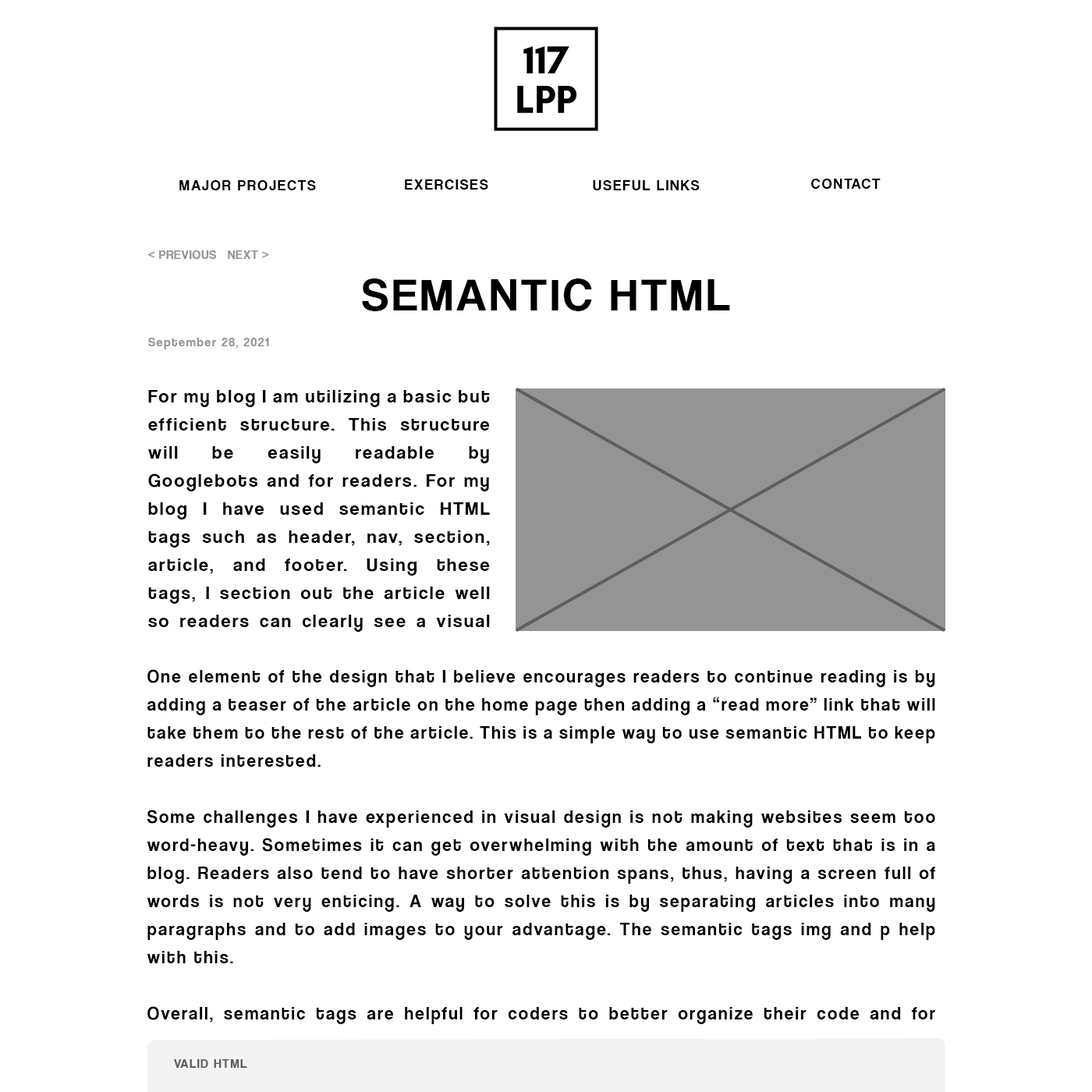
<style>
.page{position:relative;width:1092px;height:1092px;background:#ffffff}
.page>*{position:absolute;margin:0}
.t1{font:15.2px "CoolveticaRg-Regular";letter-spacing:0.1em;color:#000000}
.t2{font:12.5px "CoolveticaRg-Regular";letter-spacing:0.05em;color:#949494}
.t3{font:46.8px "CoolveticaRg-Regular";letter-spacing:0.075em;color:#000000}
.t4{font:18.7px/28.1px "CoolveticaRg-Regular";letter-spacing:0.1em;color:#000000}
.t5{font:12.5px/28.1px "CoolveticaRg-Regular";letter-spacing:0.1em;color:#949494}
.t6{font:18.7px/28.1px "CoolveticaRg-Regular";letter-spacing:0.1em;color:#000000;scale:0.96 1}
.t7{font:18.7px/28.1px "CoolveticaRg-Regular";letter-spacing:0.1em;color:#949494;scale:0.96 1}
.t8{font:12.5px "CoolveticaRg-Regular";letter-spacing:0.1em;color:#5f5e5e}
</style>
<div class="page">
<p class="t1" style="left:179px;top:180px;width:137px;height:10px">MAJOR PROJECTS</p>
<p class="t1" style="left:405px;top:179px;width:83px;height:11px">EXERCISES</p>
<p class="t1" style="left:593px;top:180px;width:107px;height:10px">USEFUL LINKS</p>
<p class="t1" style="left:811px;top:179px;width:70px;height:10px">CONTACT</p>
<p class="t2" style="left:148px;top:250px;width:121px;height:9px">&lt; PREVIOUS   NEXT &gt;</p>
<p class="t3" style="left:362px;top:278px;width:368px;height:33px">SEMANTIC HTML</p>
<p class="t4" style="left:148px;top:338px;width:342px;height:294px"><span class="t5">September 28, 2021<br><br></span>For my blog I am utilizing a basic but efficient structure. This structure will be easily readable by Googlebots and for readers. For my blog I have used semantic HTML tags such as header, nav, section, article, and footer. Using these tags, I section out the article well so readers can clearly see a visual hierarchy. To also help with the hierarchy, I used nested tags.</p>
<p class="t6" style="left:147px;top:669px;width:788px;height:355px;text-align:justify">One element of the design that I believe encourages readers to continue reading is by adding a teaser of the article on the home page then adding a “read more” link that will take them to the rest of the article. This is a simple way to use semantic HTML to keep readers interested.<br><br>Some challenges I have experienced in visual design is not making websites seem too word-heavy. Sometimes it can get overwhelming with the amount of text that is in a blog. Readers also tend to have shorter attention spans, thus, having a screen full of words is not very enticing. A way to solve this is by separating articles into many paragraphs and to add images to your advantage. The semantic tags img and p help with this.<br><br>Overall, semantic tags are helpful for coders to better organize their code and for readers by making websites easier to read.<br><br><span class="t7">Lauren Hong</span></p>
<p class="t8" style="left:174px;top:1059px;width:73px;height:9px">VALID HTML</p>
</div>
